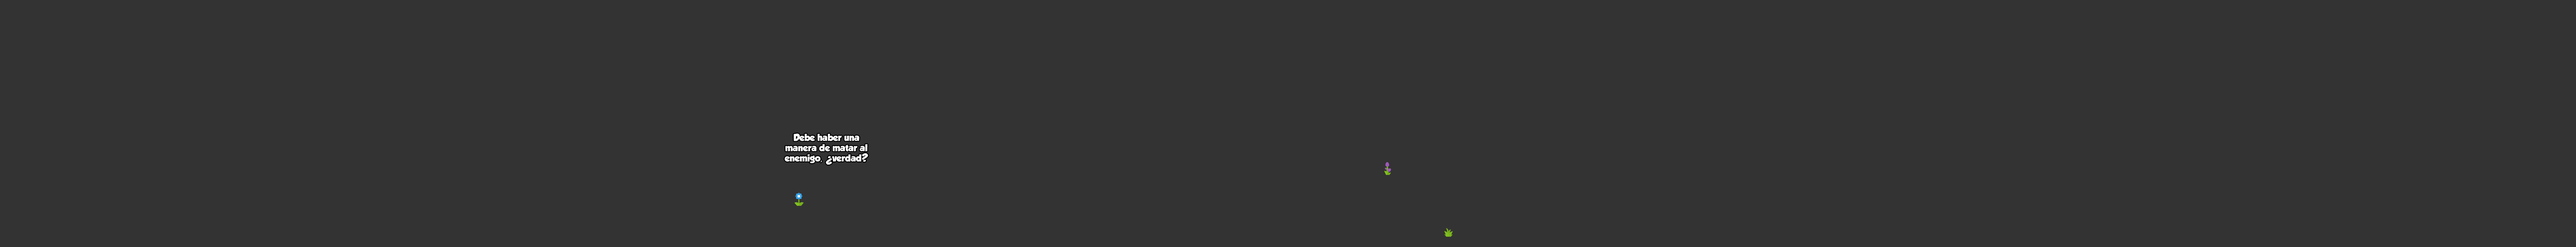
<style>
.page{position:relative;width:2576px;height:247px;background:#333333}
.page>*{position:absolute;margin:0}
.t1{font:8.6px "GROBOLD";color:#ffffff}
</style>
<div class="page">
<p class="t1" style="left:785px;top:134px;width:83px;height:30px;text-align:center">Debe haber una manera de matar al enemigo,     verdad?</p>
<p class="t1" style="left:826px;top:156px;width:6px;height:9px;rotate:-180deg">?</p>
</div>
